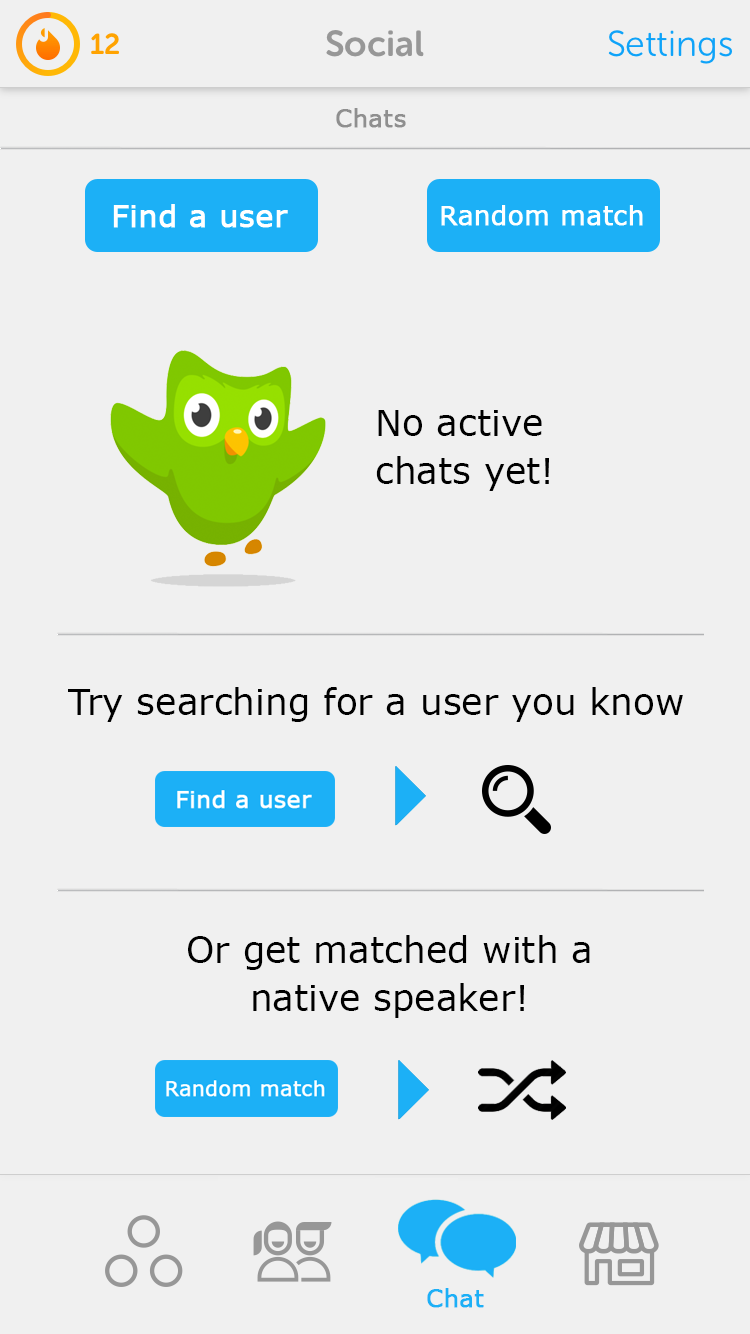
<style>
.page{position:relative;width:750px;height:1334px;background:#f0f0f0}
.page>*{position:absolute;margin:0}
.t1{font:24px "MSReferenceSansSerif";color:#8e8e8e;font-weight:bold}
.t2{font:36px/48px "MSReferenceSansSerif";color:#000000}
.t3{font:36px "MSReferenceSansSerif";color:#000000}
.t4{font:24px "MSReferenceSansSerif";color:#1cb0f6;font-weight:bold}
</style>
<div class="page">
<p class="t1" style="left:336px;top:108px;width:70px;height:20px">Chats</p>
<p class="t2" style="left:376px;top:410px;width:173px;height:81px">No active<br>chats yet!</p>
<p class="t3" style="left:68px;top:687px;width:615px;height:35px">Try searching for a user you know</p>
<p class="t2" style="left:188px;top:935px;width:402px;height:83px;text-align:center">Or get matched with a<br>native speaker!</p>
<p class="t4" style="left:427px;top:1288px;width:57px;height:20px">Chat</p>
</div>
